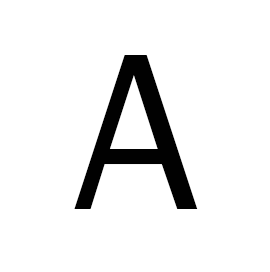
<style>
.page{position:relative;width:270px;height:272px;background:#ffffff}
.page>*{position:absolute;margin:0}
.t1{font:343.8px "FreesiaUPC";color:#010101}
</style>
<div class="page">
<p class="t1" style="left:74px;top:55px;width:124px;height:154px">A</p>
</div>
